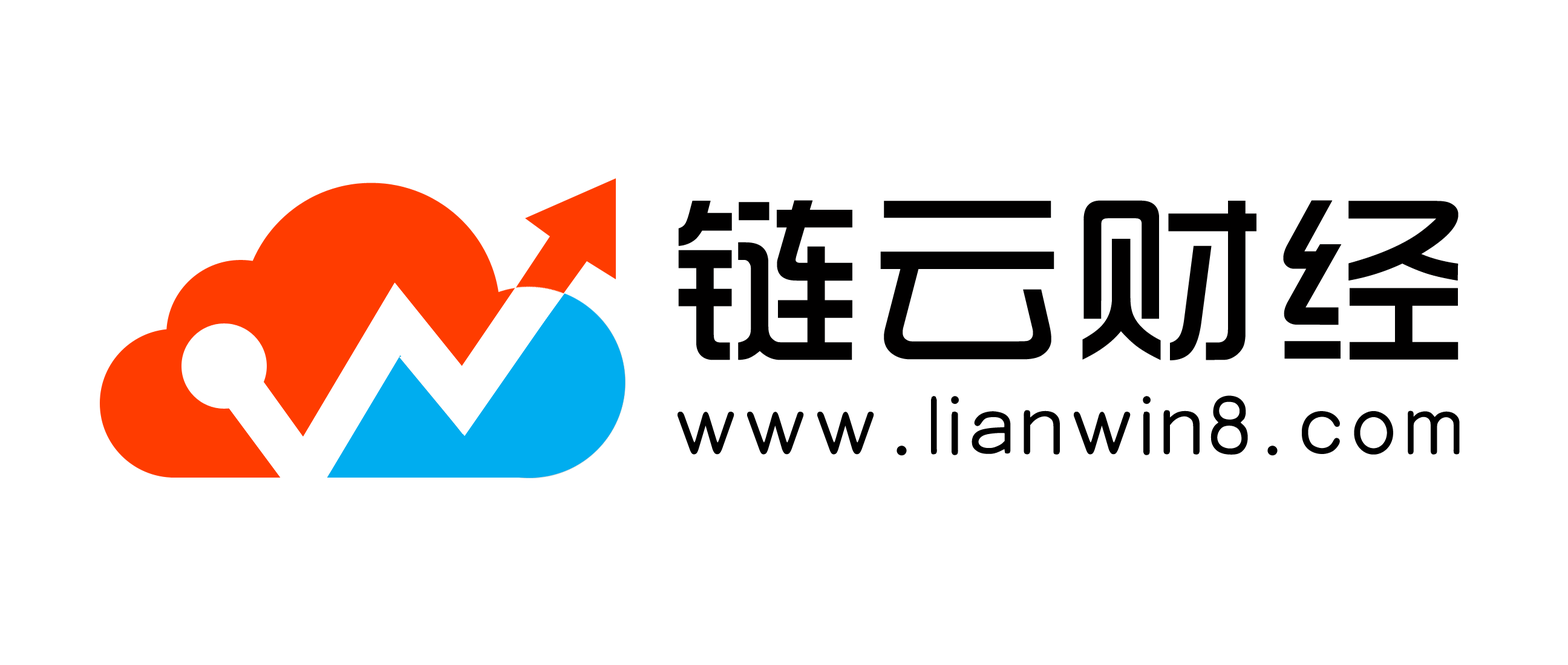
<style>
.page{position:relative;width:1568px;height:665px;background:#ffffff}
.page>*{position:absolute;margin:0}
.t1{font:192.4px "TRENDS";letter-spacing:0.05em;color:#010000}
.t2{font:80.4px "HYe3gj";letter-spacing:0.05em;color:#000000}
</style>
<div class="page">
<p class="t1" style="left:678px;top:200px;width:781px;height:161px">链云财经</p>
<p class="t2" style="left:678px;top:396px;width:782px;height:60px">www.lianwin8.com</p>
</div>
